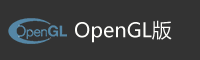
<style>
.page{position:relative;width:200px;height:60px;background:#333333}
.page>*{position:absolute;margin:0}
.t1{font:20px "MicrosoftYaHei";color:#fefefb}
</style>
<div class="page">
<p class="t1" style="left:75px;top:20px;width:97px;height:23px">OpenGL版</p>
</div>
